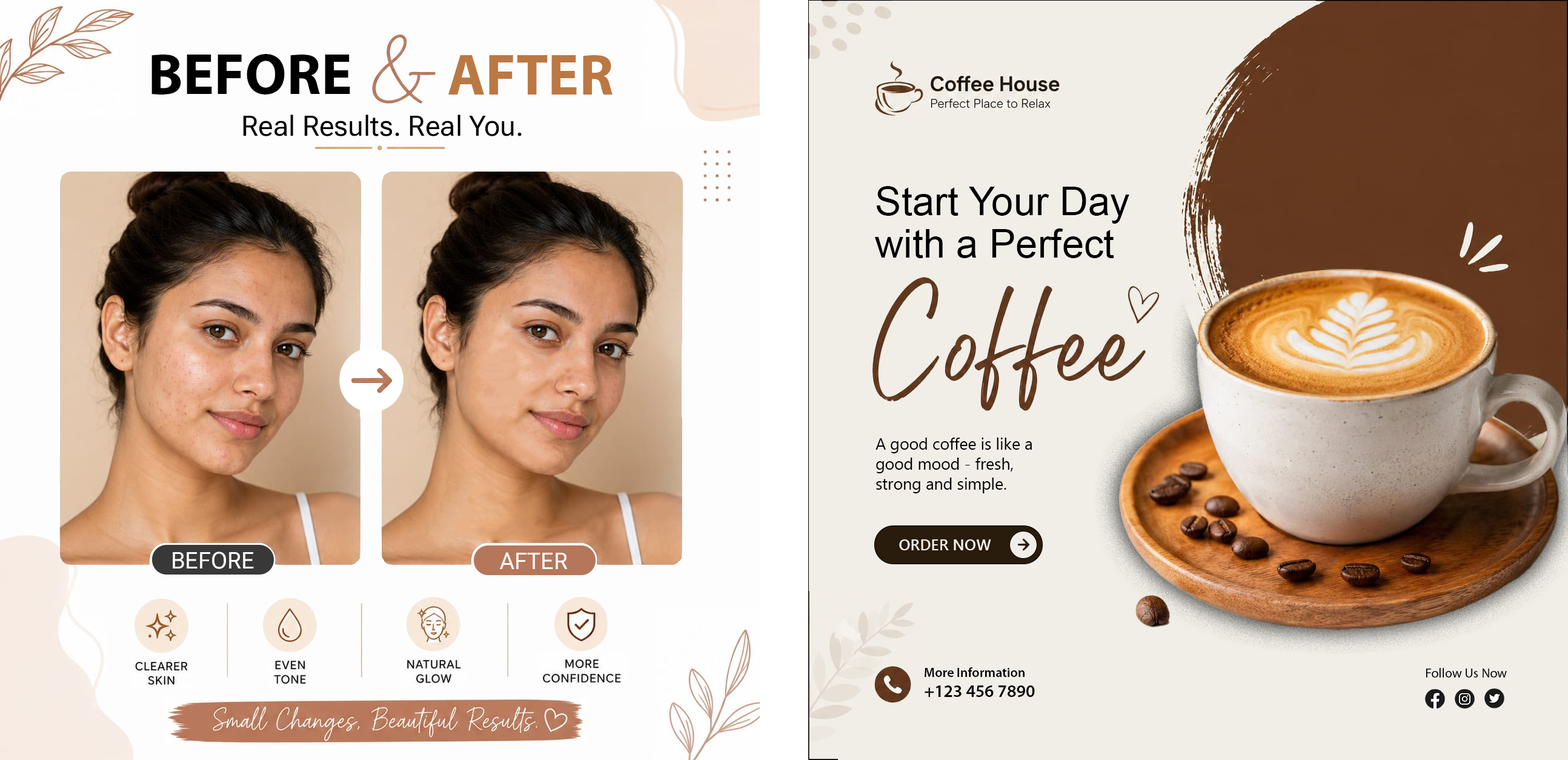
<style>
.page{position:relative;width:1568px;height:760px;background:#f1eee7}
.page>*{position:absolute;margin:0}
.t1{font:58.1px "MyriadPro-Bold";color:#000000}
.t2{font:58.1px "MyriadPro-Bold";color:#bb7843}
.t3{font:28.1px "RobotoFlex-Regular";color:#000000}
.t4{font:39.6px/42.4px "ArialMT";color:#000000}
.t5{font:16.1px/20px "SegoeUI";color:#000000}
.t6{font:15.4px "SegoeUI-Semibold";color:#faf3e9}
.t7{font:23px "RobotoFlex-Regular";color:#ffffff}
.t8{font:13.3px "MyriadPro-Semibold";color:#000000}
.t9{font:13.3px "MyriadPro-Regular";color:#000000}
.t10{font:17.5px "MyriadPro-Semibold";color:#000000}
</style>
<div class="page">
<p class="t1" style="left:151px;top:54px;width:199px;height:41px">BEFORE</p>
<p class="t2" style="left:448px;top:55px;width:165px;height:40px">AFTER</p>
<p class="t3" style="left:243px;top:115px;width:279px;height:21px">Real Results. Real You.</p>
<p class="t4" style="left:875px;top:186px;width:254px;height:72px">Start Your Day<br>with a Perfect</p>
<p class="t5" style="left:875px;top:437px;width:157px;height:56px">A good coffee is like a <br>good mood - fresh, <br>strong and simple.</p>
<p class="t6" style="left:899px;top:539px;width:92px;height:11px">ORDER NOW</p>
<p class="t7" style="left:173px;top:551px;width:81px;height:18px">BEFORE</p>
<p class="t7" style="left:500px;top:552px;width:68px;height:17px">AFTER</p>
<p class="t8" style="left:925px;top:667px;width:100px;height:10px">More Information</p>
<p class="t9" style="left:1426px;top:668px;width:81px;height:9px">Follow Us Now</p>
<p class="t10" style="left:925px;top:685px;width:110px;height:12px">+123 456 7890</p>
</div>
